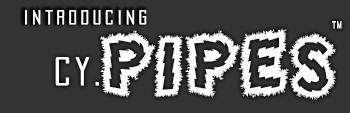
<style>
.page{position:relative;width:350px;height:113px;background:#333333}
.page>*{position:absolute;margin:0}
.t1{font:18px "PacificaCondensed";letter-spacing:0.2em;color:#ffffff;font-weight:bold}
.t2{font:73.5px "MadScience";letter-spacing:0.1em;color:#ffffff}
.t3{font:35.3px "PacificaCondensed";letter-spacing:0.1em;color:#ffffff;font-weight:bold}
.t4{font:9.3px "PacificaCondensed";letter-spacing:0.1em;color:#ffffff;font-weight:bold}
</style>
<div class="page">
<p class="t1" style="left:25px;top:10px;width:122px;height:15px">Introducing</p>
<p class="t2" style="left:55px;top:28px;width:281px;height:72px"><span class="t3">cy.</span>PIPES</p>
<p class="t4" style="left:332px;top:21px;width:10px;height:8px">TM</p>
</div>
